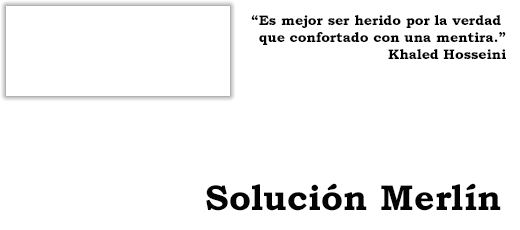
<style>
.page{position:relative;width:520px;height:230px;background:#ffffff}
.page>*{position:absolute;margin:0}
.t1{font:14px "BookmanOldStyle-Bold";color:#030303}
.t2{font:36px "BookmanOldStyle-Bold";color:#030303}
</style>
<div class="page">
<p class="t1" style="left:251px;top:15px;width:255px;height:44px;text-align:right">“Es mejor ser herido por la verdad <br>que confortado con una mentira.”<br>Khaled Hosseini</p>
<p class="t2" style="left:206px;top:183px;width:295px;height:28px">Solución Merlín</p>
</div>
